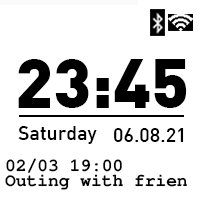
<style>
.page{position:relative;width:200px;height:200px;background:#ffffff}
.page>*{position:absolute;margin:0}
.t1{font:68.5px "DIN-Black";color:#000000}
.t2{font:19.6px "DIN-Medium";color:#000000}
.t3{font:17.9px "FreeMonoBold";color:#000000}
</style>
<div class="page">
<p class="t1" style="left:18px;top:59px;width:169px;height:49px">23:45</p>
<p class="t2" style="left:18px;top:126px;width:79px;height:18px">Saturday</p>
<p class="t2" style="left:114px;top:128px;width:70px;height:14px">06.08.21</p>
<p class="t3" style="left:6px;top:158px;width:116px;height:15px">02/03 19:00</p>
<p class="t3" style="left:5px;top:174px;width:182px;height:16px">Outing with frien</p>
</div>
